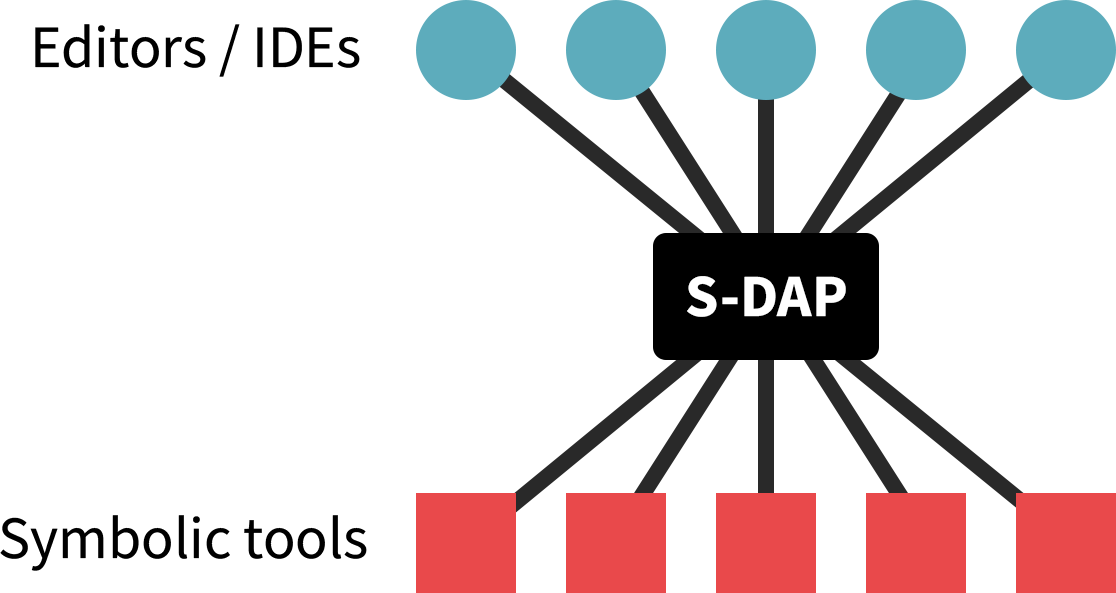
<style>
.page{position:relative;width:1116px;height:593px;background:#ffffff}
.page>*{position:absolute;margin:0}
.t1{font:60px "SourceSansRoman-Regular";color:#000000}
.t2{font:60px "SourceSansRoman-Bold";color:#ffffff}
</style>
<div class="page">
<p class="t1" style="left:35px;top:24px;width:325px;height:53px">Editors / IDEs</p>
<p class="t2" style="left:687px;top:276px;width:159px;height:41px">S-DAP</p>
<p class="t1" style="left:0px;top:515px;width:367px;height:56px">Symbolic tools</p>
</div>
